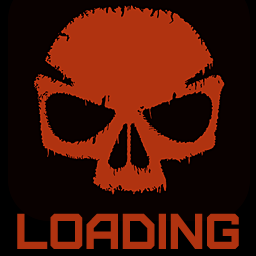
<style>
.page{position:relative;width:256px;height:256px;background:#090100}
.page>*{position:absolute;margin:0}
.t1{font:50px "Furore";color:#b03310}
</style>
<div class="page">
<p class="t1" style="left:17px;top:213px;width:222px;height:36px">Loading</p>
</div>
